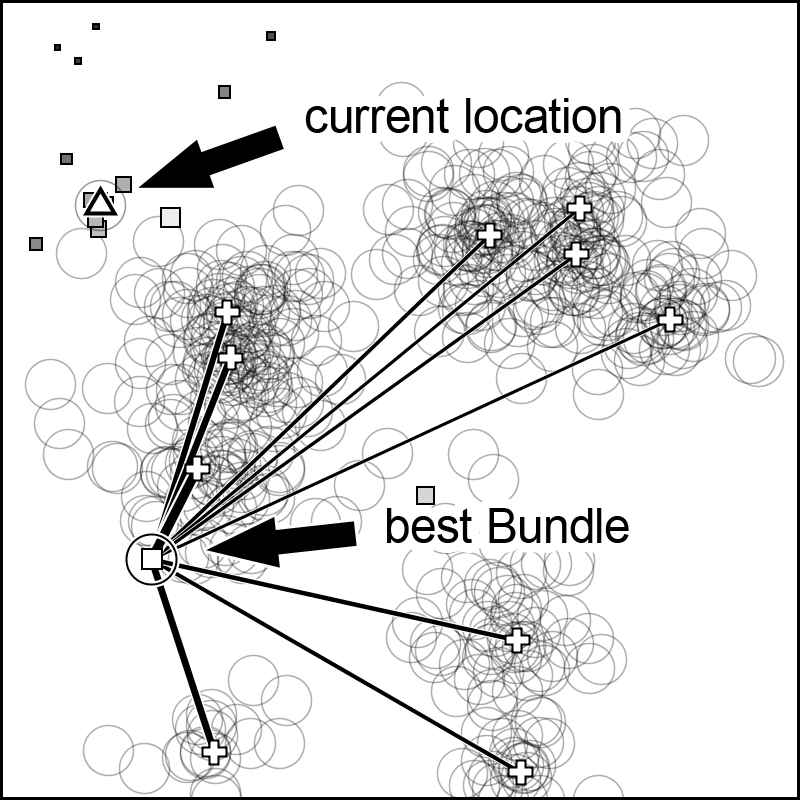
<style>
.page{position:relative;width:800px;height:800px;background:#ffffff}
.page>*{position:absolute;margin:0}
.t1{font:48px "ArialMT";color:#000000}
</style>
<div class="page">
<p class="t1" style="left:305px;top:98px;width:316px;height:35px">current location</p>
<p class="t1" style="left:387px;top:508px;width:242px;height:35px">best Bundle</p>
</div>
